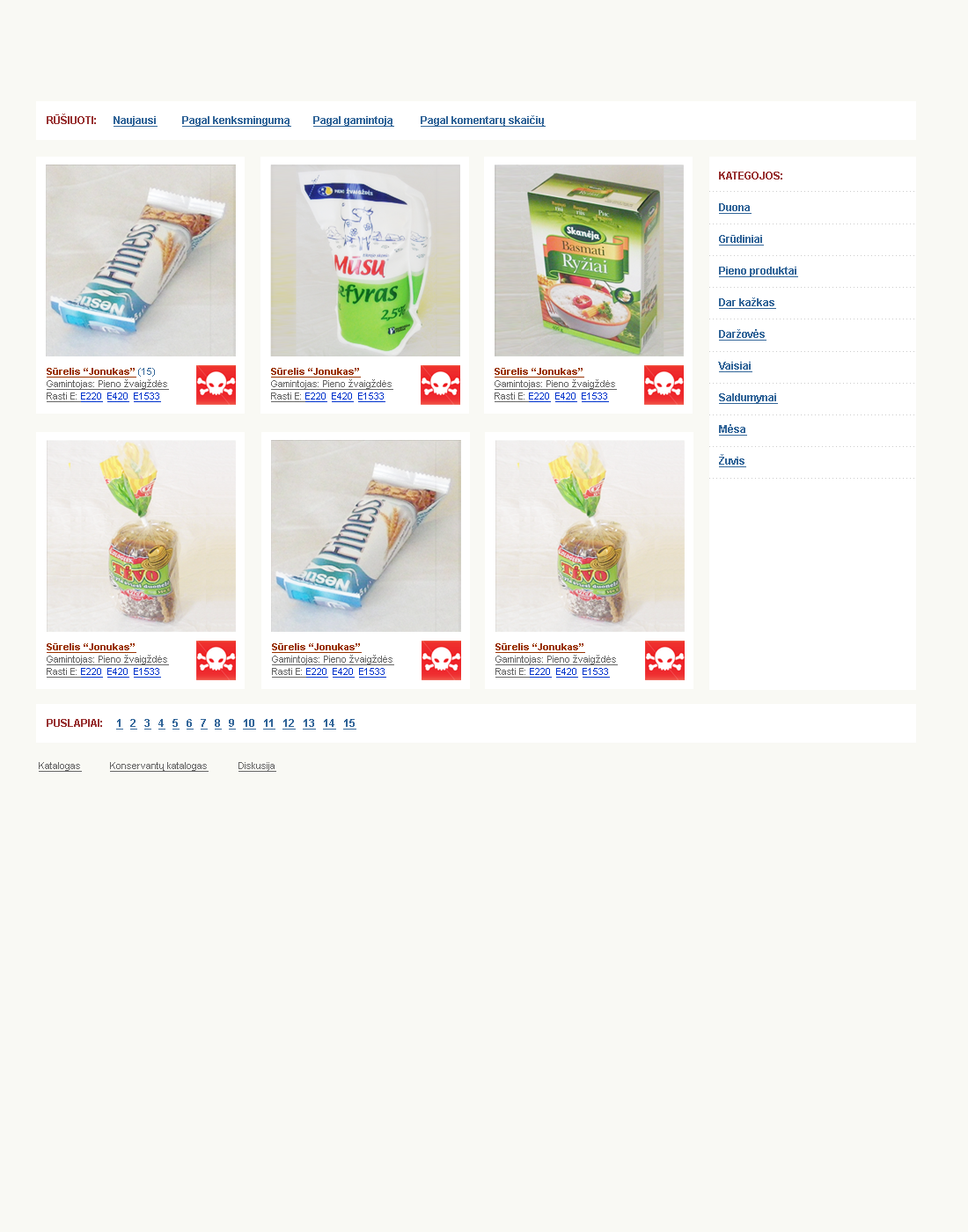
<style>
.page{position:relative;width:968px;height:1232px;background:#f9f9f4}
.page>*{position:absolute;margin:0}
.t1{font:10.6px "Arial-BoldMT";color:#993333}
.t2{font:10.6px "Arial-BoldMT";color:#336699;text-decoration:underline}
.t3{font:10.6px/31.7px "Arial-BoldMT";color:#336699;text-decoration:underline}
.t4{font:9.7px/12.3px "ArialMT";color:#666666;text-decoration:underline}
.t5{font:9.7px/12.3px "Arial-BoldMT";color:#993300;text-decoration:underline}
.t6{font:9.7px/12.3px "ArialMT";color:#336699}
.t7{font:9.7px/12.3px "ArialMT";color:#0033cc;text-decoration:underline}
.t8{font:9.7px "ArialMT";color:#666666;text-decoration:underline}
</style>
<div class="page">
<p class="t1" style="left:47px;top:114px;width:49px;height:10px">RŪŠIUOTI:</p>
<p class="t2" style="left:114px;top:116px;width:44px;height:11px">Naujausi</p>
<p class="t2" style="left:182px;top:116px;width:109px;height:11px">Pagal kenksmingumą</p>
<p class="t2" style="left:313px;top:116px;width:81px;height:11px">Pagal gamintoją</p>
<p class="t2" style="left:421px;top:115px;width:125px;height:12px">Pagal komentarų skaičių</p>
<p class="t1" style="left:719px;top:172px;width:63px;height:8px">KATEGOJOS:</p>
<p class="t3" style="left:718px;top:203px;width:80px;height:264px">Duona<br>Grūdiniai<br>Pieno produktai<br>Dar kažkas<br>Daržovės<br>Vaisiai<br>Saldumynai<br>Mėsa<br>Žuvis</p>
<p class="t4" style="left:47px;top:368px;width:122px;height:34px"><span class="t5">Sūrelis “Jonukas” </span><span class="t6">(15)<br></span>Gamintojas: Pieno žvaigždės<br>Rasti E: <span class="t7">E220  E420  E1533</span></p>
<p class="t4" style="left:271px;top:368px;width:122px;height:34px"><span class="t5">Sūrelis “Jonukas”<br></span>Gamintojas: Pieno žvaigždės<br>Rasti E: <span class="t7">E220  E420  E1533</span></p>
<p class="t4" style="left:495px;top:368px;width:122px;height:34px"><span class="t5">Sūrelis “Jonukas”<br></span>Gamintojas: Pieno žvaigždės<br>Rasti E: <span class="t7">E220  E420  E1533</span></p>
<p class="t4" style="left:47px;top:643px;width:122px;height:35px"><span class="t5">Sūrelis “Jonukas”<br></span>Gamintojas: Pieno žvaigždės<br>Rasti E: <span class="t7">E220  E420  E1533</span></p>
<p class="t4" style="left:272px;top:643px;width:122px;height:35px"><span class="t5">Sūrelis “Jonukas”<br></span>Gamintojas: Pieno žvaigždės<br>Rasti E: <span class="t7">E220  E420  E1533</span></p>
<p class="t4" style="left:495px;top:643px;width:123px;height:35px"><span class="t5">Sūrelis “Jonukas”<br></span>Gamintojas: Pieno žvaigždės<br>Rasti E: <span class="t7">E220  E420  E1533</span></p>
<p class="t1" style="left:47px;top:719px;width:55px;height:8px">PUSLAPIAI:</p>
<p class="t2" style="left:116px;top:719px;width:240px;height:10px">1   2   3   4   5   6   7   8   9   10   11   12   13   14   15</p>
<p class="t8" style="left:39px;top:762px;width:43px;height:10px">Katalogas</p>
<p class="t8" style="left:110px;top:762px;width:99px;height:10px">Konservantų katalogas</p>
<p class="t8" style="left:238px;top:762px;width:38px;height:10px">Diskusija</p>
</div>
